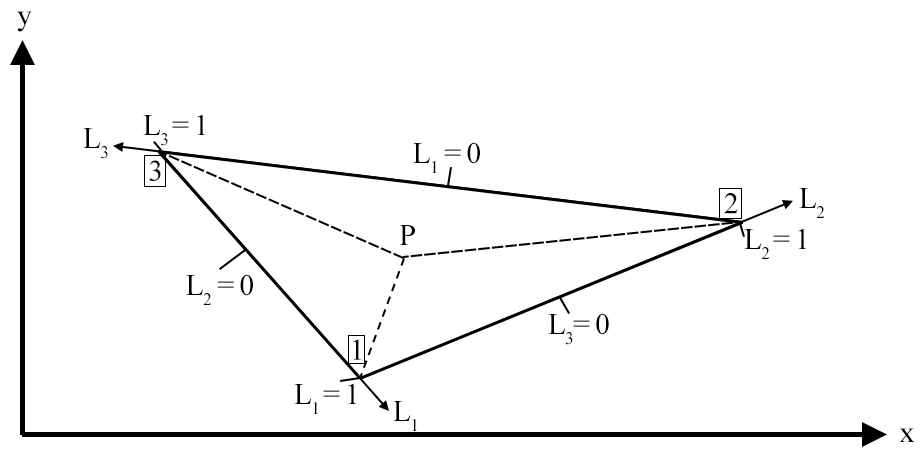
<style>
.page{position:relative;width:924px;height:460px;background:#ffffff}
.page>*{position:absolute;margin:0}
.t1{font:30px "TimesNewRomanPSMT";letter-spacing:-0.04em;color:#000000}
</style>
<div class="page">
<p class="t1" style="left:17px;top:11px;width:15px;height:21px">y</p>
<p class="t1" style="left:143px;top:114px;width:63px;height:32px">L3 = 1</p>
<p class="t1" style="left:83px;top:128px;width:25px;height:31px">L3</p>
<p class="t1" style="left:413px;top:142px;width:67px;height:31px">L1 = 0</p>
<p class="t1" style="left:149px;top:160px;width:12px;height:21px">3</p>
<p class="t1" style="left:724px;top:193px;width:14px;height:21px">2</p>
<p class="t1" style="left:799px;top:188px;width:26px;height:30px">L2</p>
<p class="t1" style="left:399px;top:225px;width:16px;height:20px">P</p>
<p class="t1" style="left:744px;top:228px;width:63px;height:31px">L2 = 1</p>
<p class="t1" style="left:186px;top:274px;width:67px;height:31px">L2 = 0</p>
<p class="t1" style="left:548px;top:313px;width:61px;height:32px">L3= 0</p>
<p class="t1" style="left:353px;top:339px;width:8px;height:21px">1</p>
<p class="t1" style="left:294px;top:383px;width:63px;height:31px">L1 = 1</p>
<p class="t1" style="left:393px;top:401px;width:24px;height:30px">L1</p>
<p class="t1" style="left:899px;top:428px;width:16px;height:14px">x</p>
</div>
